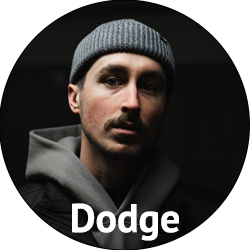
<style>
.page{position:relative;width:250px;height:250px;background:#ffffff}
.page>*{position:absolute;margin:0}
.t1{font:40px "PTSans-Bold";color:#ffffff}
</style>
<div class="page">
<p class="t1" style="left:72px;top:203px;width:107px;height:38px">Dodge</p>
</div>
